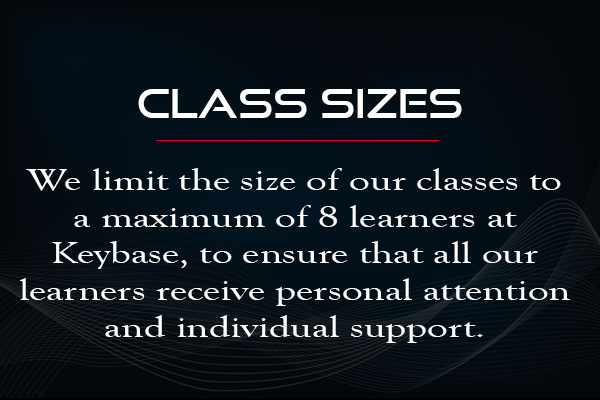
<style>
.page{position:relative;width:600px;height:400px}
.page>*{position:absolute;margin:0}
.t1{font:40px "GoodTimesRg-Regular";color:#ffffff}
.t2{font:30.7px "GoudyOldStyleT-Regular";color:#ffffff;scale:1.34 1}
</style>
<div class="page">
<p class="t1" style="left:138px;top:89px;width:324px;height:29px">Class Sizes</p>
<p class="t2" style="left:20px;top:168px;width:550px;height:175px;text-align:center">We limit the size of our classes to a maximum of 8 learners at Keybase, to ensure that all our learners receive personal attention and individual support.</p>
</div>
